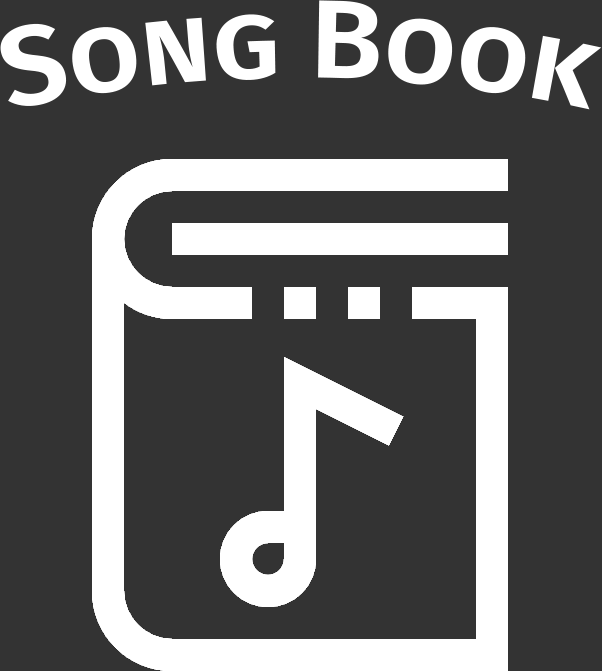
<style>
.page{position:relative;width:602px;height:671px;background:#333333}
.page>*{position:absolute;margin:0}
.t1{font:112px "FiraSans-SemiBold";color:#ffffff;font-variant:small-caps}
</style>
<div class="page">
<p class="t1" style="left:0px;top:0px;width:602px;height:110px">Song Book</p>
</div>
